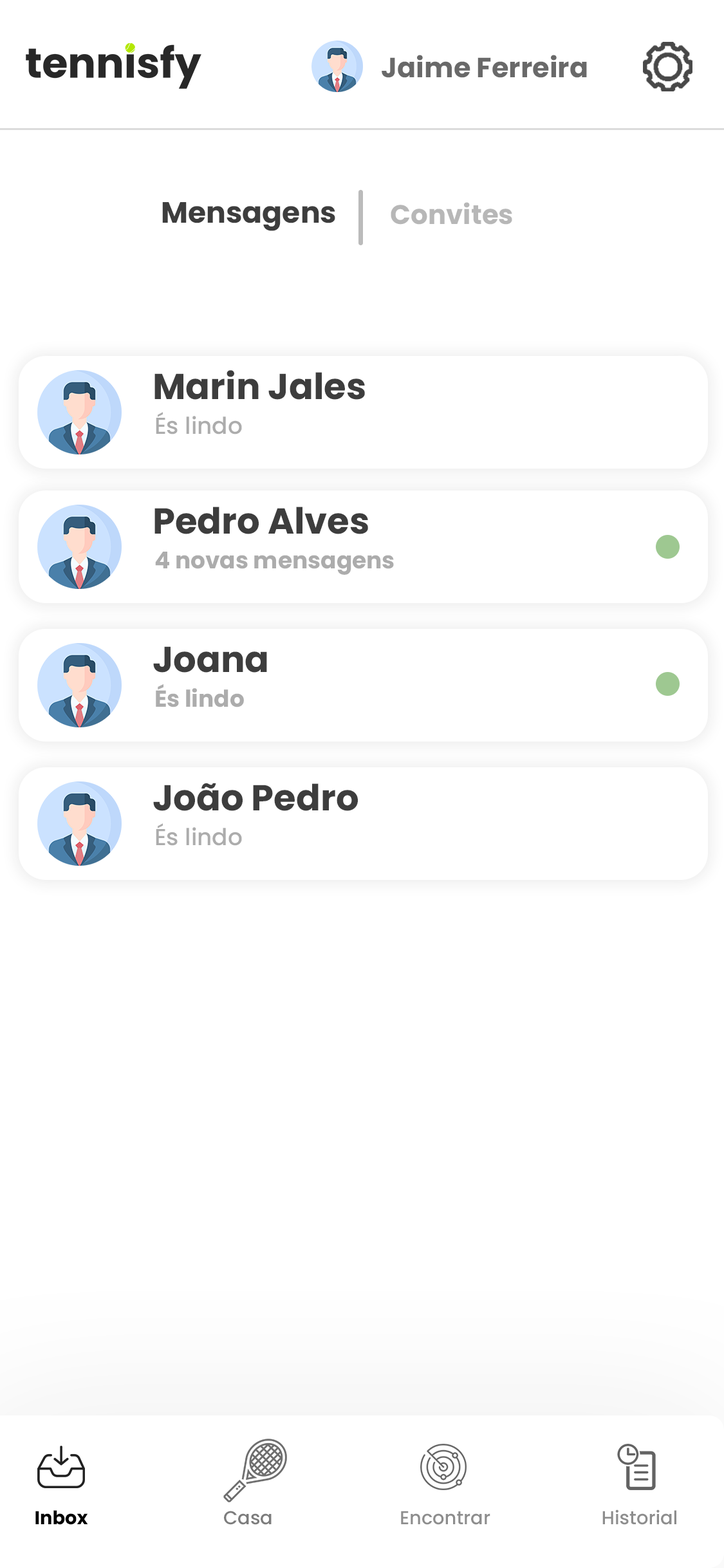
<style>
.page{position:relative;width:724px;height:1568px;background:#ffffff}
.page>*{position:absolute;margin:0}
.t1{font:27.7px "Poppins-Bold";color:#696969}
.t2{font:29.4px "Poppins-Bold";color:#3d3d3d}
.t3{font:26.9px "Poppins-Bold";color:#b7b7b7}
.t4{font:36px "Poppins-Bold";color:#3d3d3d}
.t5{font:23.2px "Poppins-Medium";color:#acacac}
.t6{font:23.2px "Poppins-Bold";color:#acacac}
.t7{font:18.7px "Poppins-Bold";color:#000000}
.t8{font:18.7px "Poppins-Medium";color:#7c7c7c}
.t9{font:18.7px "Poppins-Medium";color:#8d8d8d}
</style>
<div class="page">
<p class="t1" style="left:382px;top:55px;width:205px;height:23px">Jaime Ferreira</p>
<p class="t2" style="left:162px;top:202px;width:173px;height:29px">Mensagens</p>
<p class="t3" style="left:391px;top:202px;width:121px;height:23px">Convites</p>
<p class="t4" style="left:154px;top:370px;width:211px;height:30px">Marin Jales</p>
<p class="t5" style="left:156px;top:412px;width:86px;height:22px">És lindo</p>
<p class="t4" style="left:154px;top:507px;width:214px;height:27px">Pedro Alves</p>
<p class="t6" style="left:155px;top:552px;width:239px;height:23px">4 novas mensagens</p>
<p class="t4" style="left:153px;top:646px;width:114px;height:27px">Joana</p>
<p class="t6" style="left:156px;top:684px;width:88px;height:23px">És lindo</p>
<p class="t4" style="left:153px;top:783px;width:205px;height:28px">João Pedro</p>
<p class="t5" style="left:156px;top:823px;width:86px;height:23px">És lindo</p>
<p class="t7" style="left:35px;top:1510px;width:53px;height:15px">Inbox</p>
<p class="t8" style="left:224px;top:1511px;width:48px;height:14px">Casa</p>
<p class="t9" style="left:401px;top:1511px;width:89px;height:14px">Encontrar</p>
<p class="t9" style="left:602px;top:1509px;width:75px;height:16px">Historial</p>
</div>
